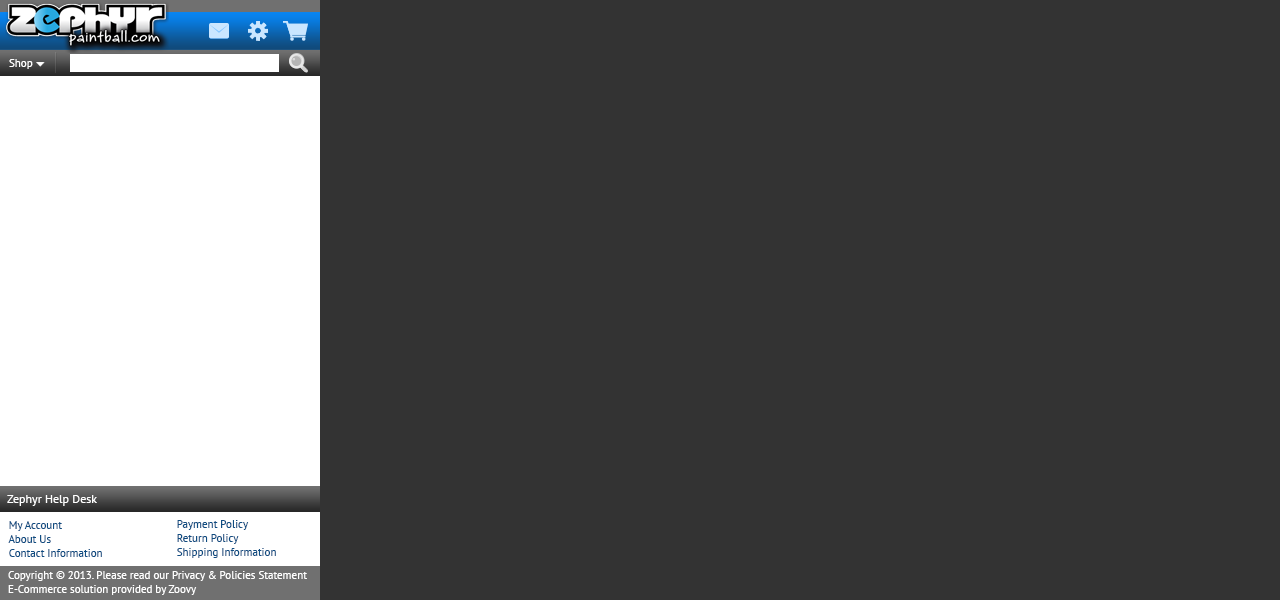
<style>
.page{position:relative;width:1280px;height:600px;background:#333333}
.page>*{position:absolute;margin:0}
.t1{font:11px "PTSans-Regular";color:#ffffff}
.t2{font:12px "PTSans-Regular";color:#ffffff}
.t3{font:11px/14px "PTSans-Regular";color:#0f4d82}
.t4{font:11px/14px "PTSans-Regular";color:#ffffff}
</style>
<div class="page">
<p class="t1" style="left:9px;top:59px;width:24px;height:10px">Shop</p>
<p class="t2" style="left:7px;top:495px;width:90px;height:11px">Zephyr Help Desk</p>
<p class="t3" style="left:8px;top:521px;width:94px;height:36px">My Account<br>    About Us<br>    Contact Information</p>
<p class="t3" style="left:177px;top:520px;width:99px;height:38px">Payment Policy<br>    Return Policy<br>    Shipping Information</p>
<p class="t4" style="left:8px;top:571px;width:299px;height:24px">Copyright © 2013. Please read our Privacy &amp; Policies Statement<br>E-Commerce solution provided by Zoovy</p>
</div>
